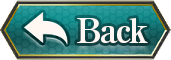
<style>
.page{position:relative;width:171px;height:60px}
.page>*{position:absolute;margin:0}
.t1{font:34px "RyuminPro-ExBold";letter-spacing:-0.08em;color:#fff7f3}
</style>
<div class="page">
<p class="t1" style="left:77px;top:18px;width:71px;height:25px">Back</p>
</div>
